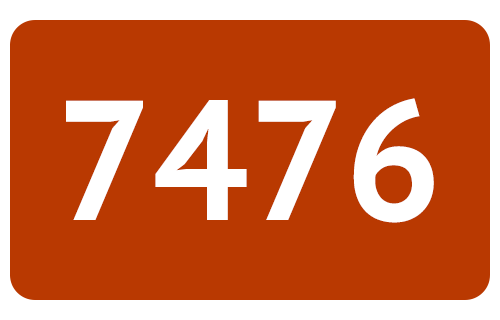
<style>
.page{position:relative;width:500px;height:320px;background:#b93901}
.page>*{position:absolute;margin:0}
.t1{font:170px "PTSans-Bold";color:#ffffff}
</style>
<div class="page">
<p class="t1" style="left:66px;top:98px;width:368px;height:125px">7476</p>
</div>
